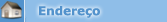
<style>
.page{position:relative;width:167px;height:22px;background:#8fbee8}
.page>*{position:absolute;margin:0}
.t1{font:12px "Verdana-Bold";color:#5292cc}
</style>
<div class="page">
<p class="t1" style="left:39px;top:6px;width:61px;height:12px">Endereço</p>
</div>
